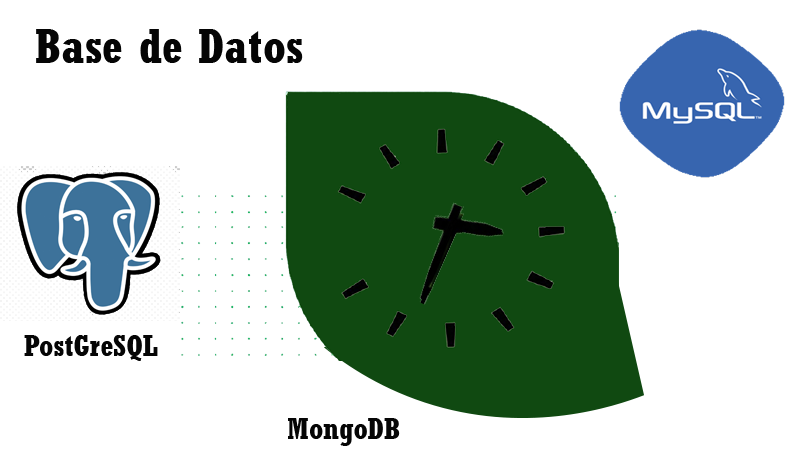
<style>
.page{position:relative;width:800px;height:452px;background:#ffffff}
.page>*{position:absolute;margin:0}
.t1{font:48px "Rockwell-CondensedBold";color:#050505}
.t2{font:30px "Rockwell-CondensedBold";color:#050505}
</style>
<div class="page">
<p class="t1" style="left:36px;top:29px;width:267px;height:34px">Base de Datos</p>
<p class="t2" style="left:24px;top:335px;width:134px;height:26px">PostGreSQL</p>
<p class="t2" style="left:288px;top:418px;width:112px;height:28px">MongoDB</p>
</div>
